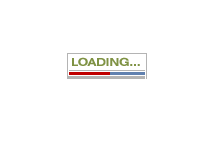
<style>
.page{position:relative;width:218px;height:148px;background:#ffffff}
.page>*{position:absolute;margin:0}
.t1{font:11px "Swiss721BT-BoldExtended";letter-spacing:-0.025em;color:#7f9244;text-transform:uppercase}
</style>
<div class="page">
<p class="t1" style="left:72px;top:57px;width:68px;height:9px">loading...</p>
</div>
